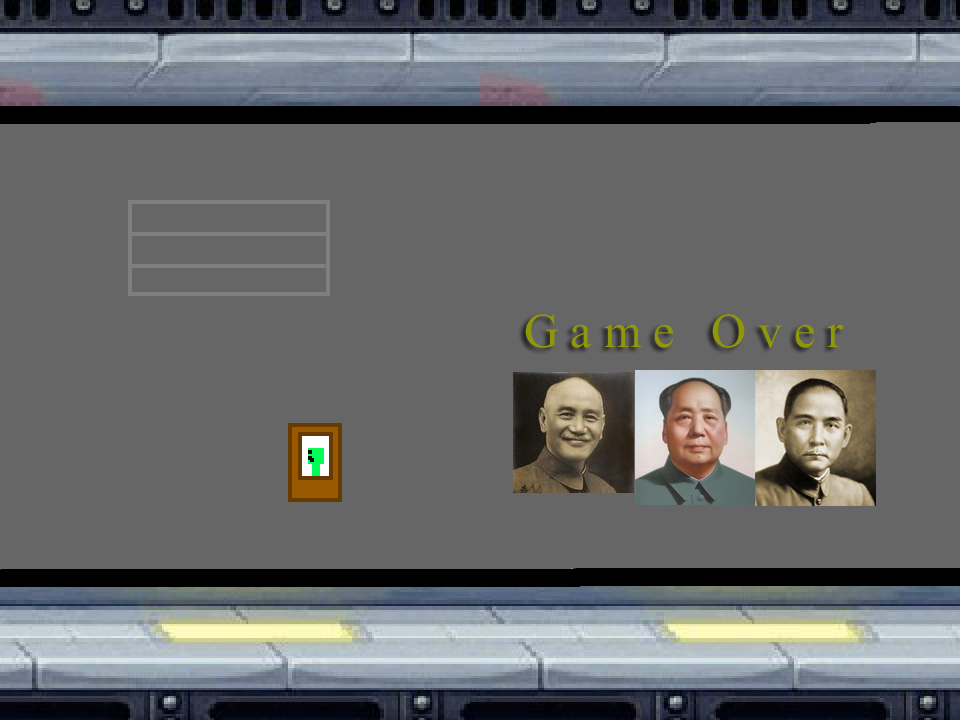
<style>
.page{position:relative;width:960px;height:720px;background:#666666}
.page>*{position:absolute;margin:0}
.t1{font:60px "Aparajita";letter-spacing:0.2em;color:#90980a}
</style>
<div class="page">
<p class="t1" style="left:525px;top:314px;width:319px;height:34px">Game Over</p>
</div>
